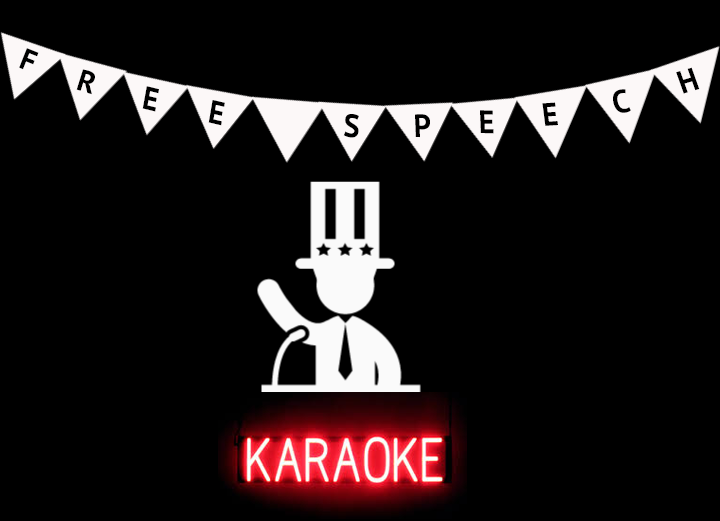
<style>
.page{position:relative;width:720px;height:521px;background:#000000}
.page>*{position:absolute;margin:0}
.t1{font:30px "PTSans-Bold";color:#000000}
.t2{font:32.4px "PTSans-Bold";color:#000000;scale:0.94 1}
</style>
<div class="page">
<p class="t1" style="left:19px;top:48px;width:20px;height:22px;rotate:22deg">F</p>
<p class="t1" style="left:76px;top:69px;width:19px;height:26px;rotate:17deg">R</p>
<p class="t2" style="left:676px;top:67px;width:24px;height:27px;rotate:-16deg">H</p>
<p class="t2" style="left:142px;top:86px;width:17px;height:26px;rotate:14deg">E</p>
<p class="t2" style="left:613px;top:89px;width:18px;height:24px;rotate:-10deg">C</p>
<p class="t2" style="left:208px;top:100px;width:17px;height:26px;rotate:13deg">E</p>
<p class="t2" style="left:542px;top:102px;width:16px;height:24px;rotate:-4deg">E</p>
<p class="t2" style="left:480px;top:110px;width:14px;height:24px;rotate:1deg">E</p>
<p class="t2" style="left:343px;top:114px;width:16px;height:24px;rotate:7deg">S</p>
<p class="t2" style="left:415px;top:114px;width:15px;height:24px;rotate:1deg">P</p>
</div>
